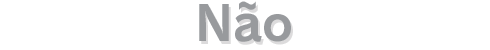
<style>
.page{position:relative;width:490px;height:50px;background:#ffffff}
.page>*{position:absolute;margin:0}
.t1{font:48px "RodinPro-B";color:#989a9d}
</style>
<div class="page">
<p class="t1" style="left:199px;top:1px;width:92px;height:41px">Não</p>
</div>
